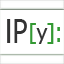
<style>
.page{position:relative;width:64px;height:64px;background:#ffffff}
.page>*{position:absolute;margin:0}
.t1{font:32px "Tahoma";color:#333333}
.t2{font:33.3px "Tahoma";color:#333333;scale:0.8 1}
.t3{font:22.4px "Tahoma";color:#339933}
.t4{font:22.4px "Tahoma";color:#333333}
.t5{font:28px "Tahoma";color:#339933;scale:0.8 1}
</style>
<div class="page">
<p class="t1" style="left:7px;top:19px;width:20px;height:24px">l<span class="t2">P</span></p>
<p class="t3" style="left:30px;top:23px;width:24px;height:21px">[       ]</p>
<p class="t4" style="left:36px;top:28px;width:12px;height:16px">y</p>
<p class="t5" style="left:57px;top:27px;width:3px;height:15px">:</p>
</div>
